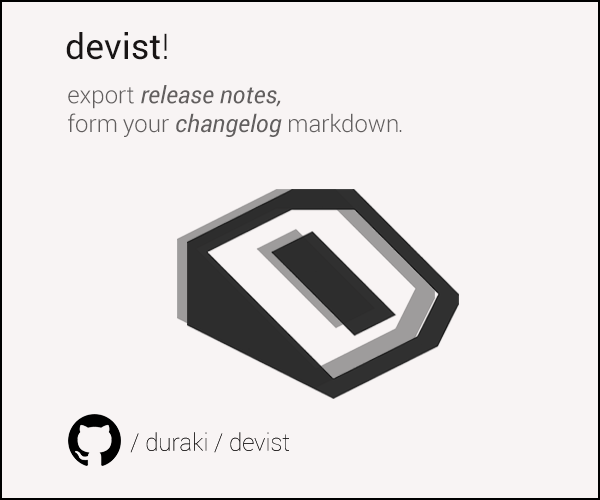
<style>
.page{position:relative;width:600px;height:500px;background:#f8f4f4}
.page>*{position:absolute;margin:0}
.t1{font:35.6px "Roboto-Regular";color:#191515}
.t2{font:35.6px "Roboto-Light";color:#191515}
.t3{font:24px "Roboto-Italic";color:#625f5f}
.t4{font:24px "Roboto-Light";color:#625f5f}
.t5{font:24px "Roboto-Thin";color:#191515}
</style>
<div class="page">
<p class="t1" style="left:66px;top:32px;width:101px;height:28px">devist<span class="t2">!</span></p>
<p class="t3" style="left:68px;top:85px;width:334px;height:52px"><span class="t4">export </span>release notes, <br><span class="t4">form your </span>changelog <span class="t4">markdown.</span></p>
<p class="t5" style="left:130px;top:432px;width:159px;height:21px">/ duraki / devist</p>
<p class="t5" style="left:130px;top:432px;width:159px;height:21px">/ duraki / devist</p>
</div>
